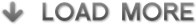
<style>
.page{position:relative;width:196px;height:25px;background:#ffffff}
.page>*{position:absolute;margin:0}
.t1{font:24px "FlorencesansBlack"}
</style>
<div class="page">
<p class="t1" style="left:42px;top:2px;width:152px;height:19px">LOAD MORE</p>
</div>
